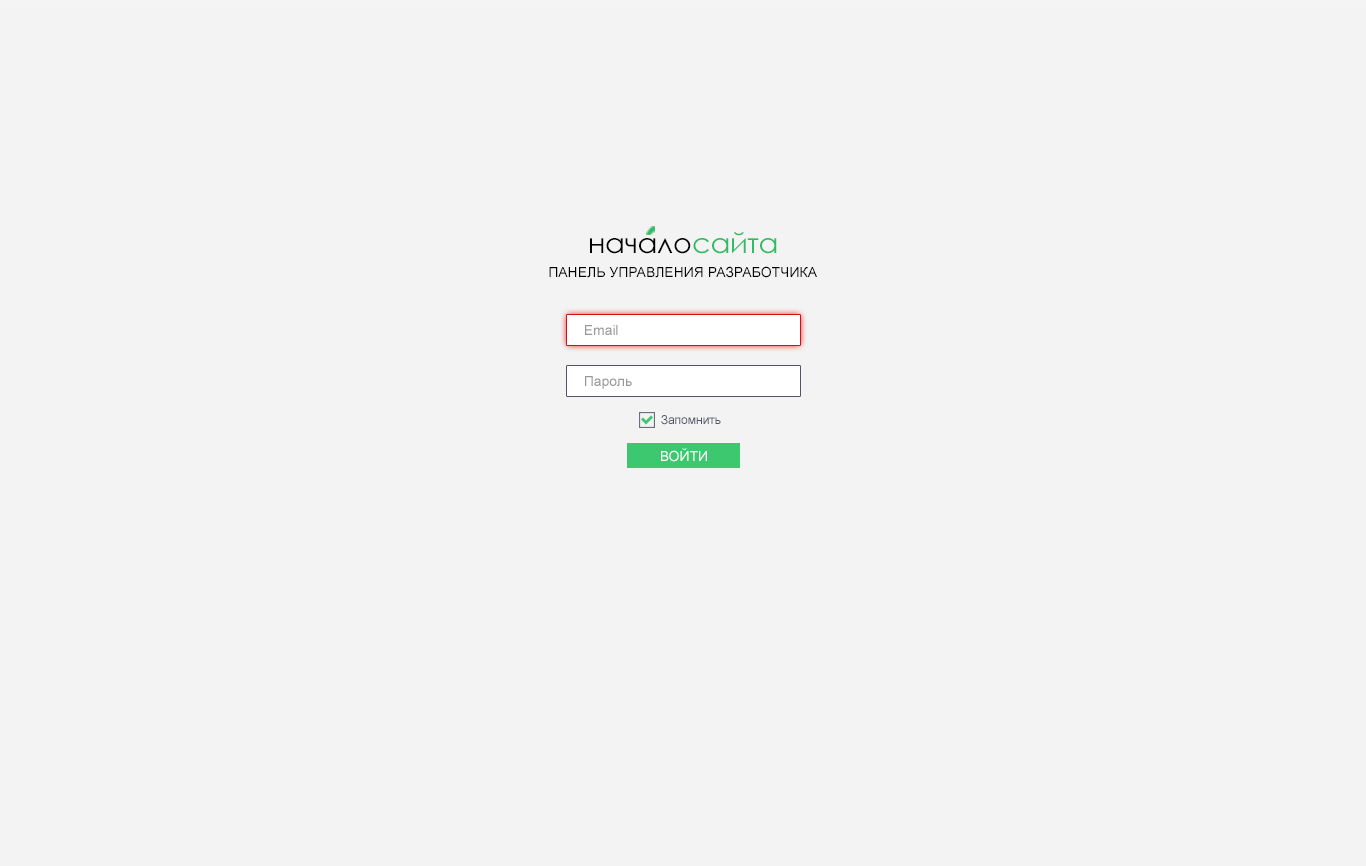
<style>
.page{position:relative;width:1366px;height:866px;background:#f3f3f3}
.page>*{position:absolute;margin:0}
.t1{font:27.8px "CenturyGothic";color:#000000}
.t2{font:27.8px "CenturyGothic";color:#34ba65}
.t3{font:14px "ArialMT";color:#000000}
.t4{font:14px "ArialMT";color:#989898}
.t5{font:12px "ArialMT";color:#515567}
.t6{font:14px "ArialMT";color:#ffffff}
</style>
<div class="page">
<p class="t1" style="left:590px;top:232px;width:187px;height:22px">начало<span class="t2">сайта</span></p>
<p class="t3" style="left:549px;top:266px;width:268px;height:12px">ПАНЕЛЬ УПРАВЛЕНИЯ РАЗРАБОТЧИКА</p>
<p class="t4" style="left:585px;top:325px;width:33px;height:10px">Email</p>
<p class="t4" style="left:585px;top:376px;width:47px;height:13px">Пароль</p>
<p class="t5" style="left:661px;top:415px;width:60px;height:10px">Запомнить</p>
<p class="t6" style="left:661px;top:448px;width:46px;height:14px">ВОЙТИ</p>
</div>
